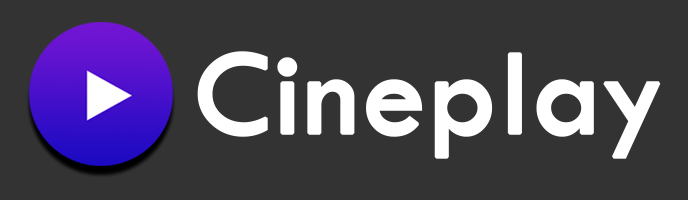
<style>
.page{position:relative;width:688px;height:200px;background:#333333}
.page>*{position:absolute;margin:0}
.t1{font:125px "TwCenMT-Regular";color:#ffffff;font-weight:bold}
</style>
<div class="page">
<p class="t1" style="left:197px;top:51px;width:464px;height:108px">Cineplay</p>
</div>
